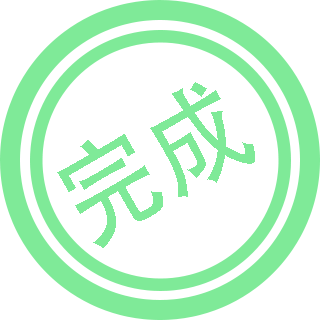
<style>
.page{position:relative;width:320px;height:320px;background:#ffffff}
.page>*{position:absolute;margin:0}
.t1{font:110px "AdobeHeitiStd-Regular";color:#7fea98;scale:0.91 1}
</style>
<div class="page">
<p class="t1" style="left:57px;top:82px;width:198px;height:166px;rotate:-30deg">完成</p>
</div>
